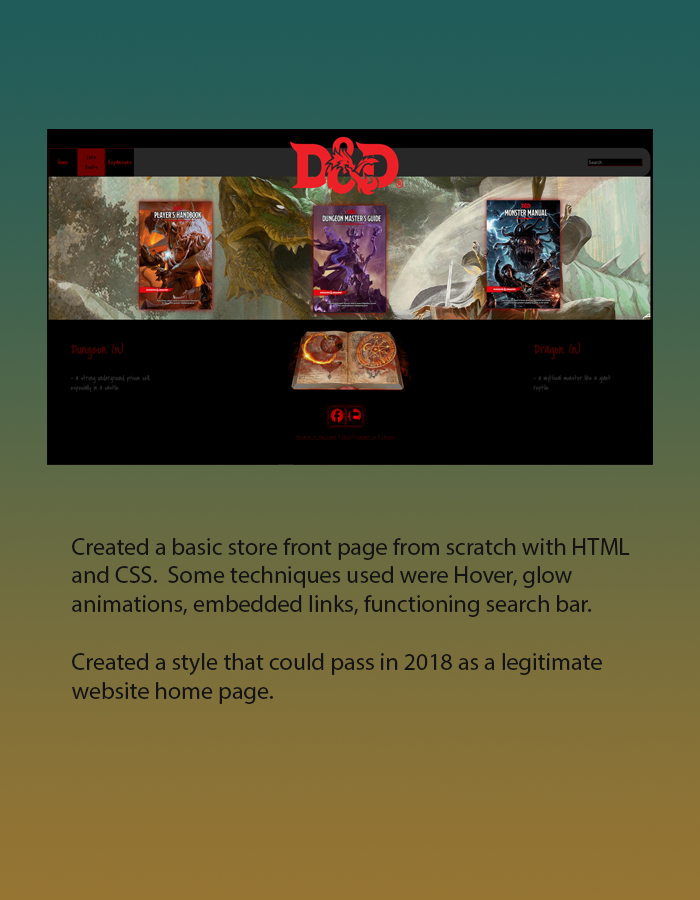
<style>
.page{position:relative;width:700px;height:900px}
.page>*{position:absolute;margin:0}
.t1{font:24px "MyriadPro-Regular";color:#131313}
</style>
<div class="page">
<p class="t1" style="left:72px;top:538px;width:558px;height:166px">Created a basic store front page from scratch with HTML <br>and CSS.  Some techniques used were Hover, glow <br>animations, embedded links, functioning search bar.<br><br>Created a style that could pass in 2018 as a legitimate <br>website home page.</p>
</div>
